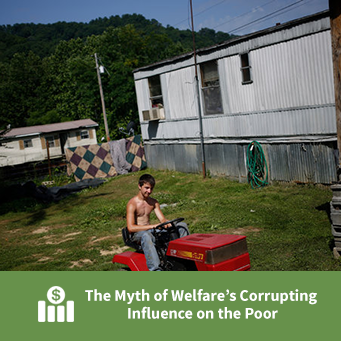
<style>
.page{position:relative;width:341px;height:341px}
.page>*{position:absolute;margin:0}
.t1{font:16px/17.7px "SourceSansPro-Bold";color:#ffffff}
</style>
<div class="page">
<p class="t1" style="left:85px;top:289px;width:232px;height:30px;text-align:center">The Myth of Welfare’s Corrupting <br>Influence on the Poor</p>
</div>
